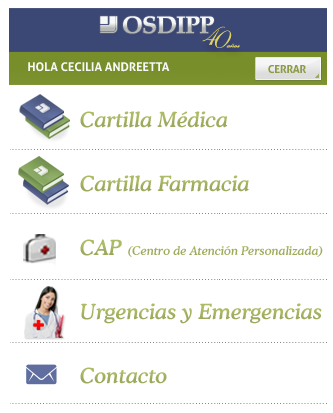
<style>
.page{position:relative;width:333px;height:413px;background:#ffffff}
.page>*{position:absolute;margin:0}
.t1{font:12px "Aller-Bold";color:#f8f8f8;text-transform:uppercase}
.t2{font:11px "Aller-Bold";letter-spacing:-0.025em;color:#8b9b48}
.t3{font:21px "CooperBT-MediumItalic";color:#acbb65}
.t4{font:21px "CooperBT-MediumItalic";color:#acbb65;text-transform:uppercase}
.t5{font:12px "CooperBT-MediumItalic";color:#acbb65}
</style>
<div class="page">
<p class="t1" style="left:28px;top:62px;width:142px;height:10px">Hola CECILIA ANDREETTA</p>
<p class="t2" style="left:268px;top:65px;width:38px;height:9px">CERRAR</p>
<p class="t3" style="left:80px;top:111px;width:148px;height:17px"><span class="t4">C</span>artilla Médica</p>
<p class="t3" style="left:80px;top:175px;width:169px;height:17px">Cartilla Farmacia</p>
<p class="t5" style="left:80px;top:239px;width:243px;height:18px"><span class="t3">CAP </span>(Centro de Atención Personalizada)</p>
<p class="t3" style="left:81px;top:303px;width:241px;height:21px">Urgencias y Emergencias</p>
<p class="t3" style="left:80px;top:367px;width:87px;height:17px">Contacto</p>
</div>
